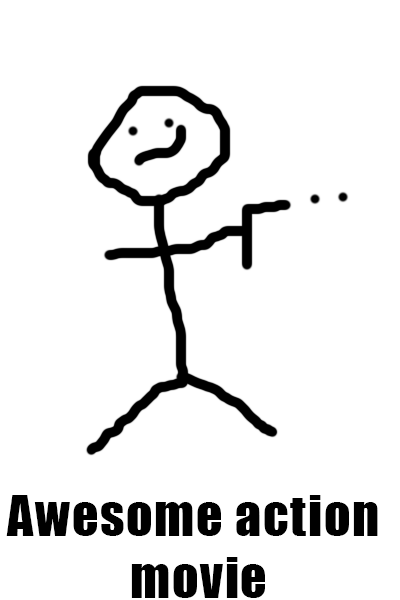
<style>
.page{position:relative;width:400px;height:600px;background:#ffffff}
.page>*{position:absolute;margin:0}
.t1{font:52px "Impact";letter-spacing:0.032em;color:#000000}
</style>
<div class="page">
<p class="t1" style="left:6px;top:495px;width:372px;height:103px;text-align:center">Awesome action <br>movie</p>
</div>
